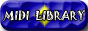
<style>
.page{position:relative;width:88px;height:31px}
.page>*{position:absolute;margin:0}
.t1{font:11px "Jokerman-Regular";color:#ffffff}
.t2{font:11px "Jokerman-Regular";color:#fefeff}
</style>
<div class="page">
<p class="t1" style="left:3px;top:10px;width:27px;height:11px">MIDI</p>
<p class="t2" style="left:35px;top:10px;width:51px;height:11px">LIBRARY</p>
</div>
